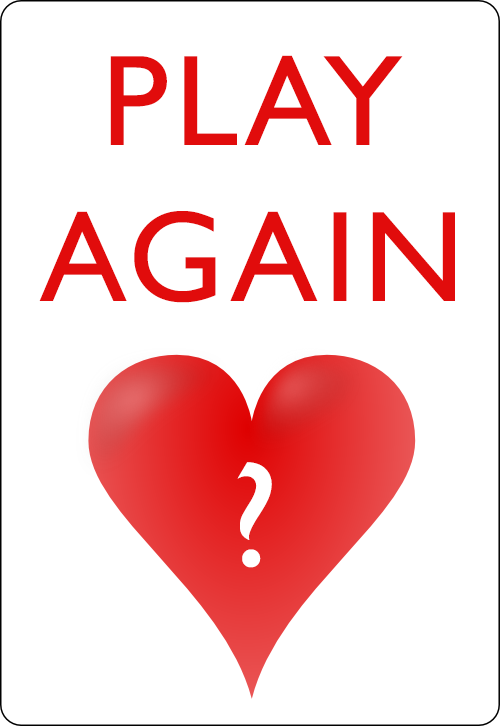
<style>
.page{position:relative;width:500px;height:726px;background:#ffffff}
.page>*{position:absolute;margin:0}
.t1{font:130px "GillSansMT";letter-spacing:0.05em;color:#e10c0c}
.t2{font:150px "GillSansMT";letter-spacing:0.05em;color:#ffffff}
</style>
<div class="page">
<p class="t1" style="left:39px;top:55px;width:416px;height:248px;text-align:center">PLAY<br>AGAIN</p>
<p class="t2" style="left:237px;top:462px;width:35px;height:106px">?</p>
</div>
